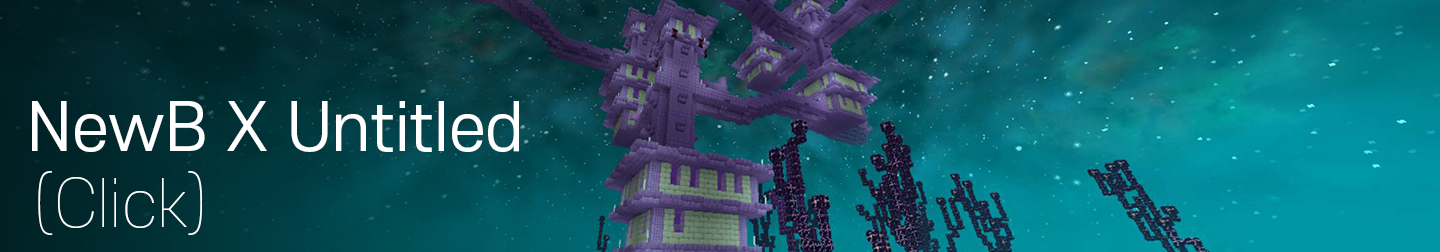
<style>
.page{position:relative;width:1440px;height:252px}
.page>*{position:absolute;margin:0}
.t1{font:64px "S-CoreDream-4Regular";color:#ffffff}
.t2{font:64px "S-CoreDream-1Thin";color:#ffffff}
</style>
<div class="page">
<p class="t1" style="left:32px;top:101px;width:487px;height:51px">NewB X Untitled</p>
<p class="t2" style="left:38px;top:171px;width:164px;height:64px">(Click)</p>
</div>
